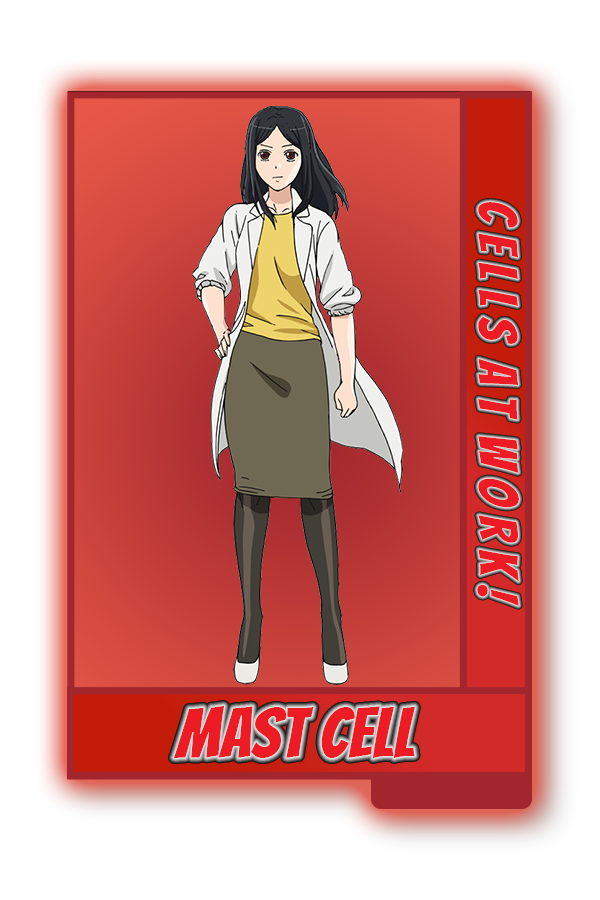
<style>
.page{position:relative;width:600px;height:900px;background:#ffffff}
.page>*{position:absolute;margin:0}
.t1{font:54px "Bangers-Regular";color:#ed1c24}
.t2{font:70px "Bangers-Regular";color:#ed1c24}
</style>
<div class="page">
<p class="t1" style="left:477px;top:202px;width:42px;height:404px;rotate:90deg">C e l l S  A t  W o r k !</p>
<p class="t2" style="left:173px;top:706px;width:242px;height:52px">Mast cell</p>
</div>
